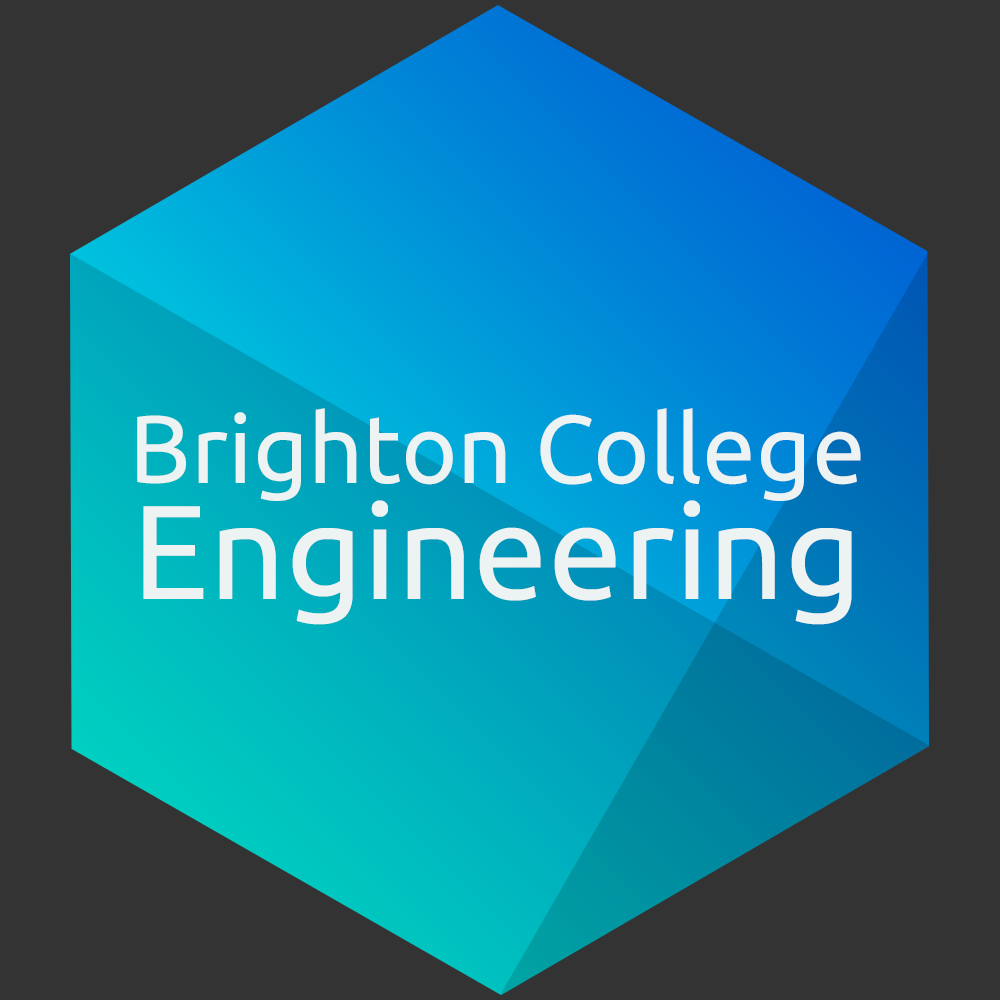
<style>
.page{position:relative;width:1000px;height:1000px;background:#333333}
.page>*{position:absolute;margin:0}
.t1{font:96.3px/115.7px "Ubuntu";color:#edf3f2}
.t2{font:133.8px/115.7px "Ubuntu";color:#edf3f2}
</style>
<div class="page">
<p class="t1" style="left:137px;top:408px;width:724px;height:217px;text-align:center">Brighton College<br><span class="t2">Engineering</span></p>
</div>
